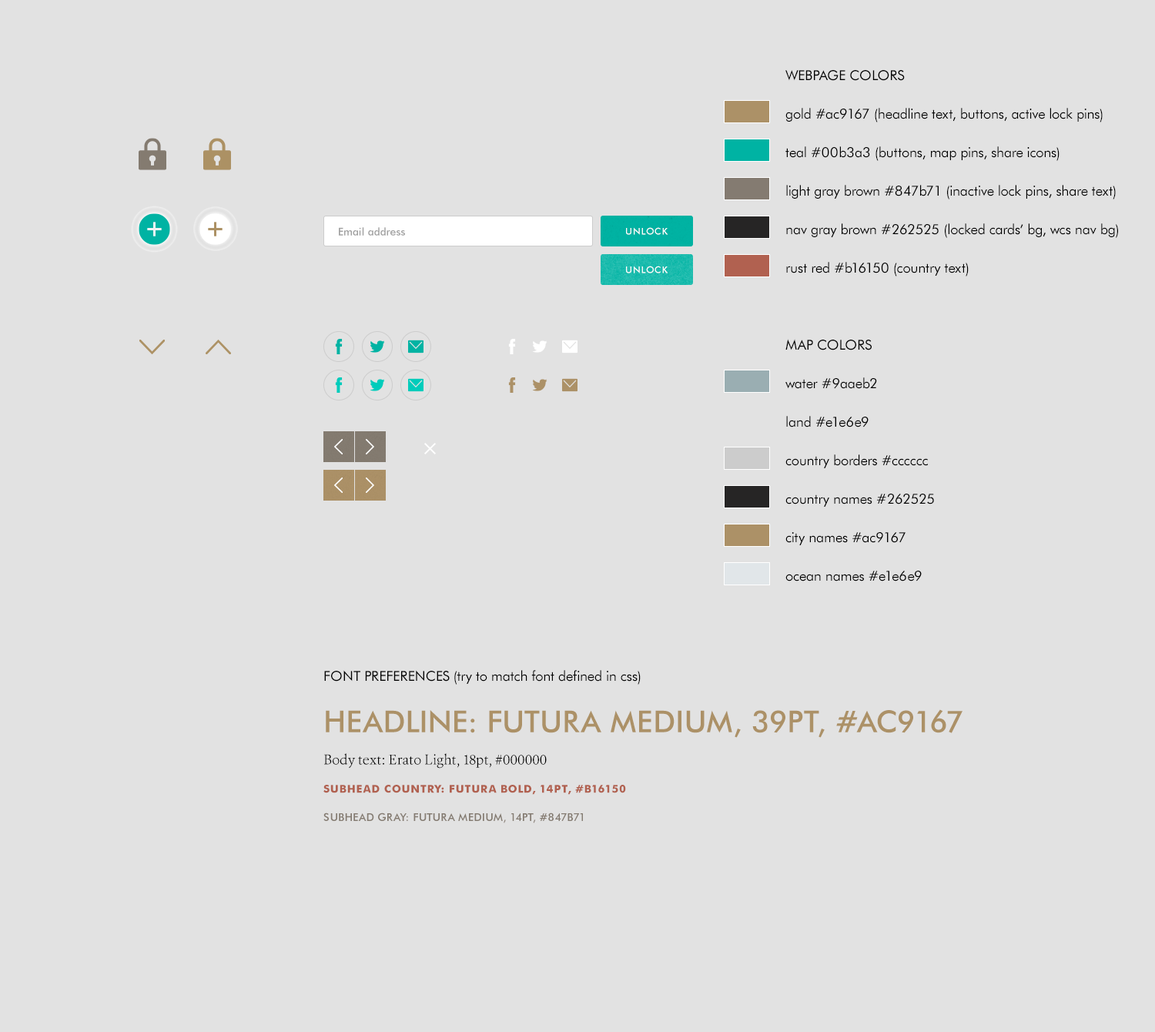
<style>
.page{position:relative;width:1155px;height:1032px;background:#e2e2e2}
.page>*{position:absolute;margin:0}
.t1{font:13.9px/38.5px "FuturaBT-Book";color:#000000}
.t2{font:13.9px/38.5px "FuturaBT-Book";color:#000000;text-transform:uppercase}
.t3{font:10.8px "FuturaBT-Medium";color:#a1a1a1}
.t4{font:9.2px "FuturaBT-Medium";letter-spacing:0.06em;color:#ffffff;text-transform:uppercase}
.t5{font:10.8px "FuturaBT-Bold";letter-spacing:0.05em;color:#b16150;text-transform:uppercase}
.t6{font:13.9px "FuturaBT-Book";color:#000000;text-transform:uppercase}
.t7{font:13.9px "FuturaBT-Book";color:#000000}
.t8{font:30px "FuturaBT-Medium";color:#ac9167;text-transform:uppercase}
.t9{font:13.9px "Erato-Light";color:#000000}
.t10{font:10.8px "FuturaBT-Medium";letter-spacing:0.025em;color:#847b71;text-transform:uppercase}
</style>
<div class="page">
<p class="t1" style="left:786px;top:70px;width:332px;height:512px"><span class="t2">webpage colors<br></span>gold #ac9167 (headline text, buttons, active lock pins)<br>teal #00b3a3 (buttons, map pins, share icons)<br>light gray brown #847b71 (inactive lock pins, share text)<br>nav gray brown #262525 (locked cards’ bg, wcs nav bg)<br>rust red #b16150 (country text)<br><br><span class="t2">map colors<br></span>water #9aaeb2<br>land #e1e6e9<br>country borders #cccccc<br>country names #262525<br>city names #ac9167<br>ocean names #e1e6e9</p>
<p class="t3" style="left:339px;top:227px;width:66px;height:9px">Email address</p>
<p class="t4" style="left:626px;top:227px;width:43px;height:8px">unlock</p>
<p class="t4" style="left:626px;top:266px;width:43px;height:7px">unlock</p>
<p class="t5" style="left:323px;top:670px;width:640px;height:153px"><span class="t6">font preferences </span><span class="t7">(try to match font defined in css)<br></span><span class="t8">headline: futura medium, 39pt, #ac9167<br></span><span class="t9">Body text: Erato Light, 18pt, #000000<br></span>subhead country: futura bold, 14pt, #b16150<br><span class="t10">subhead gray: futura medium, 14pt, #847b71</span></p>
</div>
